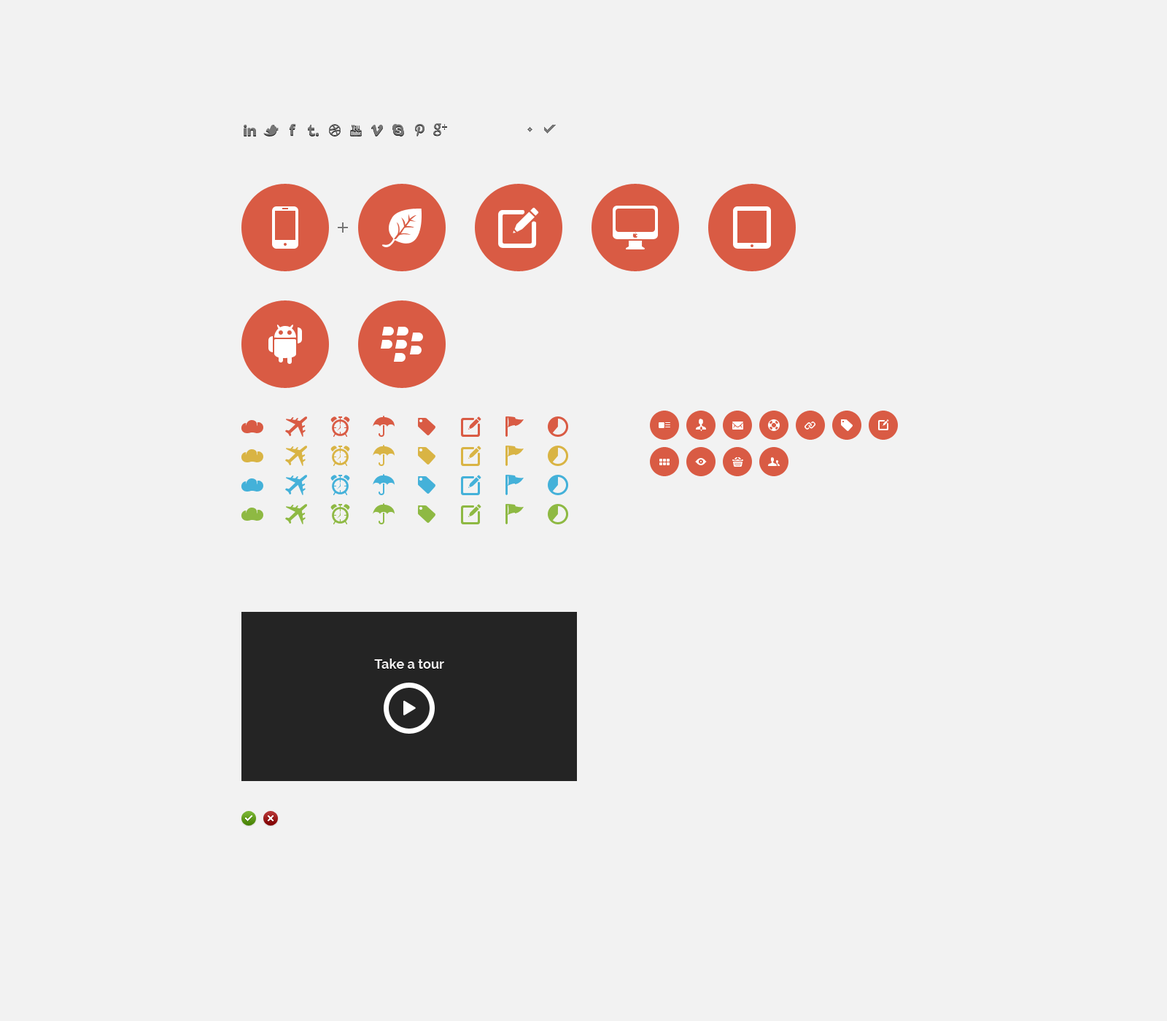
<style>
.page{position:relative;width:1167px;height:1021px;background:#f2f2f2}
.page>*{position:absolute;margin:0}
.t1{font:13.1px "Raleway-Bold";color:#f2f0f0}
</style>
<div class="page">
<p class="t1" style="left:374px;top:659px;width:70px;height:10px">Take a tour</p>
</div>
